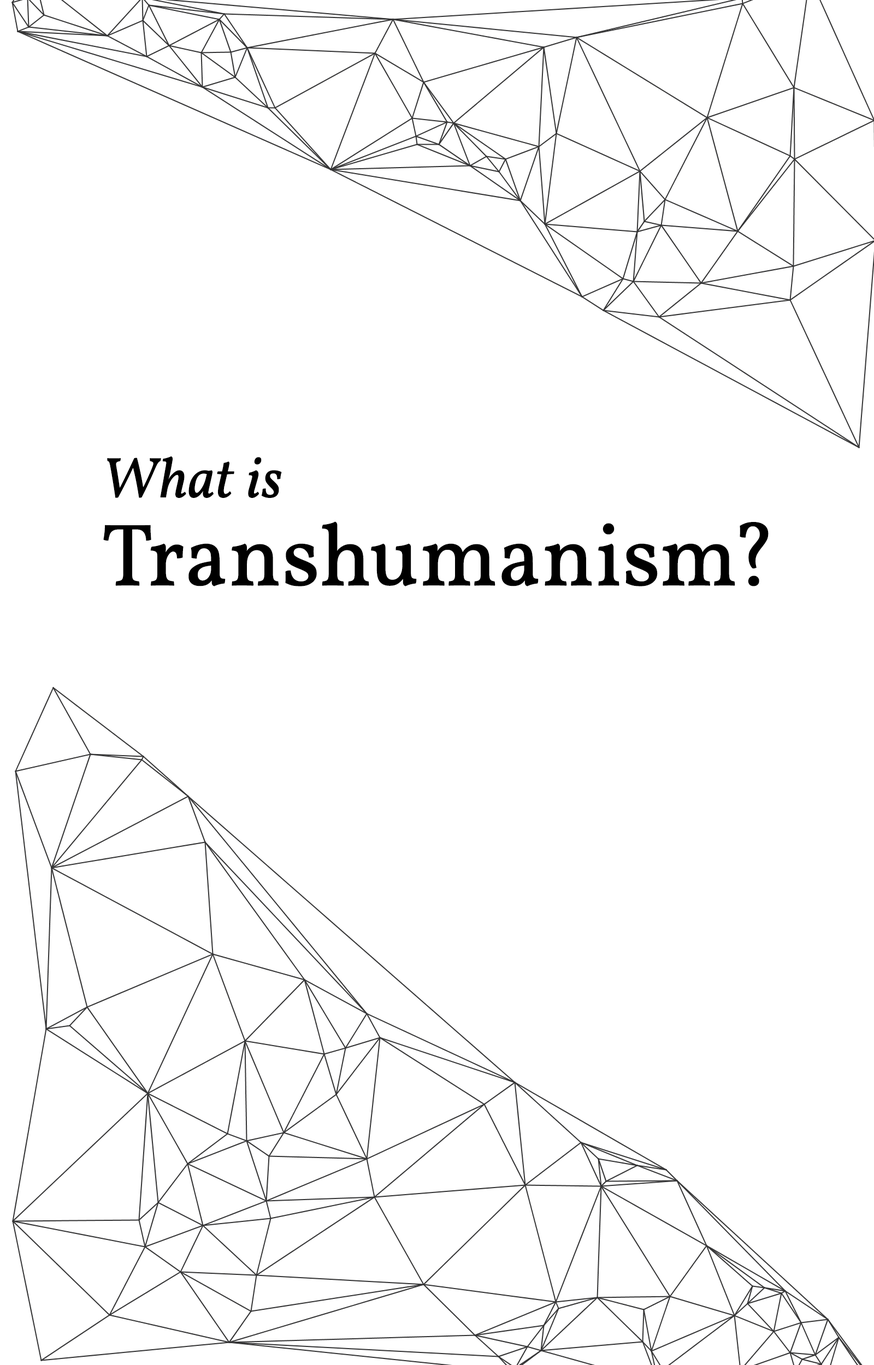
<style>
.page{position:relative;width:874px;height:1365px;background:#ffffff}
.page>*{position:absolute;margin:0}
.t1{font:87.9px/87.9px "Vollkorn-Regular";color:#000000;font-weight:bold}
.t2{font:57.1px/87.9px "Vollkorn-Italic";color:#000000;font-weight:bold}
</style>
<div class="page">
<p class="t1" style="left:103px;top:456px;width:665px;height:130px"><span class="t2">What is<br></span>Transhumanism?</p>
</div>
